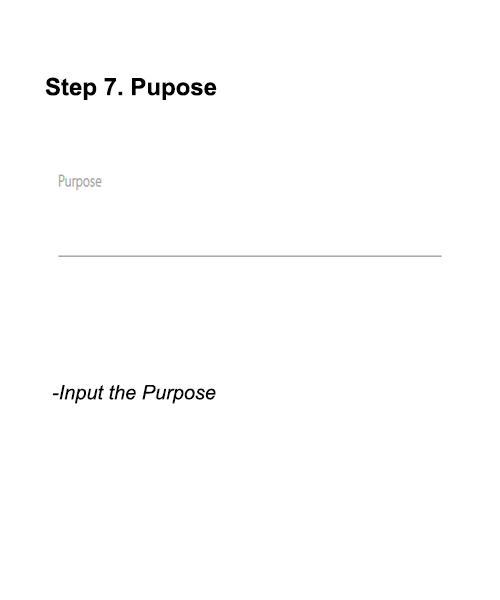
<style>
.page{position:relative;width:500px;height:600px;background:#ffffff}
.page>*{position:absolute;margin:0}
.t1{font:24px "Arial-BoldMT";color:#000000}
.t2{font:20px "Arial-ItalicMT";color:#000000}
</style>
<div class="page">
<p class="t1" style="left:45px;top:77px;width:172px;height:23px">Step 7. Pupose</p>
<p class="t2" style="left:52px;top:385px;width:164px;height:19px">-Input the Purpose</p>
</div>
